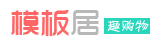
<style>
.page{position:relative;width:160px;height:55px;background:#ffffff}
.page>*{position:absolute;margin:0}
.t1{font:30px "TRENDS";color:#ff6666}
.t2{font:30px "TRENDS";color:#b8b8b8}
.t3{font:14px "HYg3gj";color:#fafdfd}
</style>
<div class="page">
<p class="t1" style="left:11px;top:10px;width:88px;height:26px">模板<span class="t2">居</span></p>
<p class="t3" style="left:107px;top:20px;width:42px;height:12px">趣购物</p>
</div>
